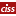
<style>
.page{position:relative;width:16px;height:16px;background:#a41111}
.page>*{position:absolute;margin:0}
.t1{font:10px "Myriad-BoldItalic";letter-spacing:-0.025em;color:#ffffff}
</style>
<div class="page">
<p class="t1" style="left:1px;top:4px;width:14px;height:8px">ciss</p>
</div>
